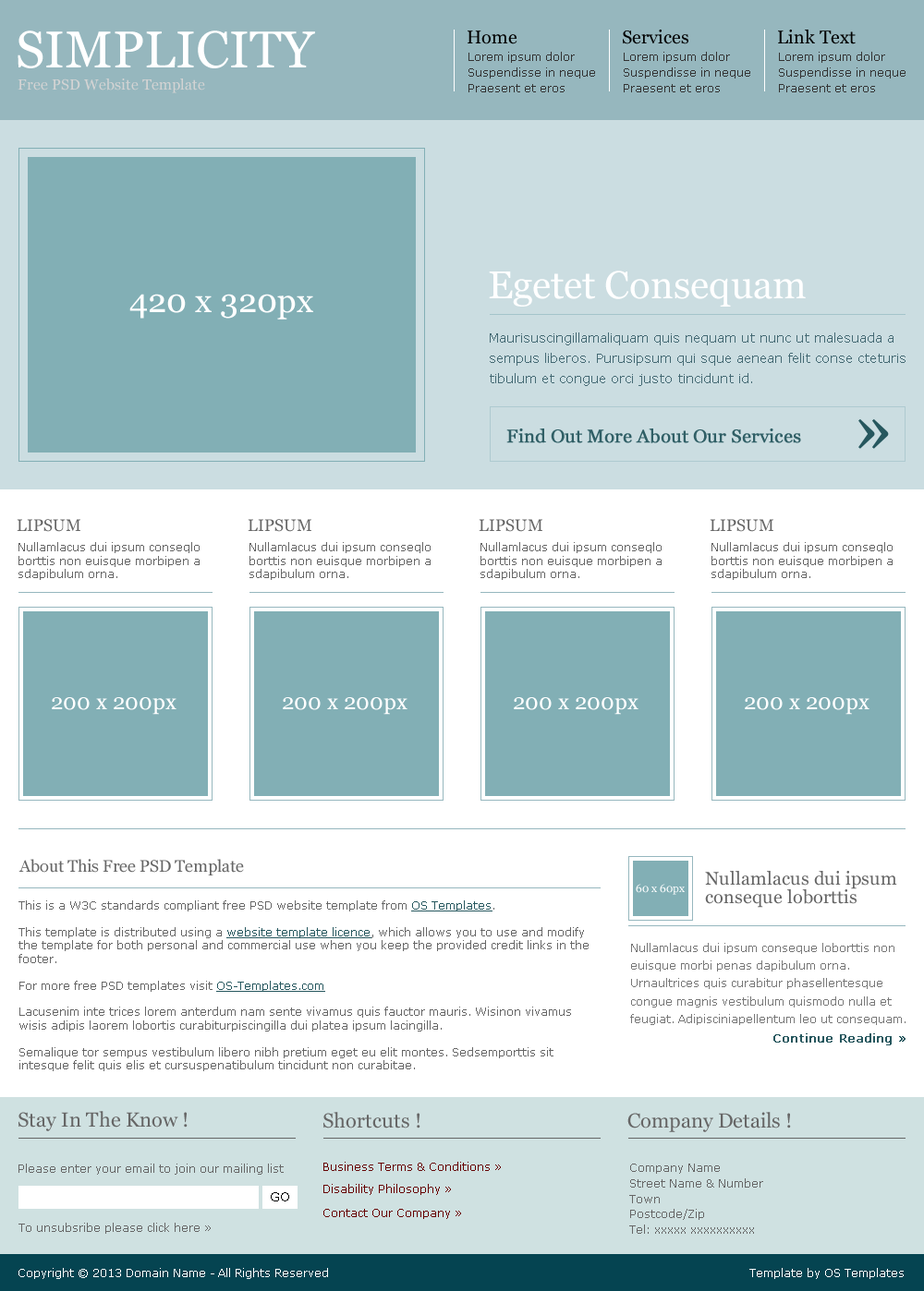
<style>
.page{position:relative;width:924px;height:1291px;background:#ffffff}
.page>*{position:absolute;margin:0}
.t1{font:18.5px "Georgia";color:#000000}
.t2{font:51.7px "Georgia";color:#ffffff}
.t3{font:11.1px/15.5px "Verdana";color:#333333}
.t4{font:14.8px "Georgia";color:#d3d3d3}
.t5{font:38.8px "Georgia";color:#ffffff}
.t6{font:33.2px "Georgia";color:#ffffff}
.t7{font:12.9px/20.7px "Verdana";color:#446973}
.t8{font:18.5px "Georgia";color:#305f66;font-weight:bold}
.t9{font:16.6px "Georgia";color:#666666}
.t10{font:11.1px/13.3px "Verdana";color:#666666}
.t11{font:22.2px "Georgia";color:#ffffff}
.t12{font:18.5px/18.5px "Georgia";color:#666666}
.t13{font:11.1px "Georgia";color:#ffffff}
.t14{font:11.1px/13.3px "Verdana";color:#26575e;text-decoration:underline}
.t15{font:11.1px/17.7px "Verdana";color:#777777}
.t16{font:12px "Verdana";color:#26575e;font-weight:bold}
.t17{font:20.3px "Georgia";color:#666666}
.t18{font:11.1px "Verdana";color:#666666}
.t19{font:11.1px "Verdana";color:#660000}
.t20{font:11.1px/15.5px "Verdana";color:#666666}
.t21{font:12.9px "Verdana";color:#000000}
.t22{font:11.1px "Verdana";color:#ffffff}
</style>
<div class="page">
<p class="t1" style="left:622px;top:30px;width:66px;height:14px">Services</p>
<p class="t1" style="left:778px;top:30px;width:77px;height:14px">Link Text</p>
<p class="t2" style="left:18px;top:30px;width:297px;height:38px">SIMPLICITY</p>
<p class="t1" style="left:467px;top:30px;width:50px;height:14px">Home</p>
<p class="t3" style="left:468px;top:52px;width:127px;height:40px">Lorem ipsum dolor<br>Suspendisse in neque<br>Praesent et eros</p>
<p class="t3" style="left:623px;top:52px;width:127px;height:40px">Lorem ipsum dolor<br>Suspendisse in neque<br>Praesent et eros</p>
<p class="t3" style="left:779px;top:52px;width:126px;height:40px">Lorem ipsum dolor<br>Suspendisse in neque<br>Praesent et eros</p>
<p class="t4" style="left:18px;top:79px;width:187px;height:14px">Free PSD Website Template</p>
<p class="t5" style="left:489px;top:271px;width:316px;height:36px">Egetet Consequam</p>
<p class="t6" style="left:129px;top:294px;width:184px;height:26px">420 x 320px</p>
<p class="t7" style="left:489px;top:332px;width:416px;height:54px">Maurisuscingillamaliquam quis nequam ut nunc ut malesuada a  sempus liberos. Purusipsum qui sque aenean felit conse cteturis tibulum et congue orci justo tincidunt id.</p>
<p class="t8" style="left:506px;top:429px;width:295px;height:14px">Find Out More About Our Services</p>
<p class="t9" style="left:17px;top:519px;width:63px;height:13px">LIPSUM</p>
<p class="t9" style="left:248px;top:519px;width:63px;height:13px">LIPSUM</p>
<p class="t9" style="left:478px;top:519px;width:64px;height:13px">LIPSUM</p>
<p class="t9" style="left:709px;top:519px;width:64px;height:13px">LIPSUM</p>
<p class="t10" style="left:18px;top:542px;width:181px;height:38px">Nullamlacus dui ipsum conseqlo borttis non euisque morbipen a sdapibulum orna.</p>
<p class="t10" style="left:249px;top:542px;width:181px;height:38px">Nullamlacus dui ipsum conseqlo borttis non euisque morbipen a sdapibulum orna.</p>
<p class="t10" style="left:480px;top:542px;width:181px;height:38px">Nullamlacus dui ipsum conseqlo borttis non euisque morbipen a sdapibulum orna.</p>
<p class="t10" style="left:711px;top:542px;width:181px;height:38px">Nullamlacus dui ipsum conseqlo borttis non euisque morbipen a sdapibulum orna.</p>
<p class="t11" style="left:52px;top:697px;width:124px;height:18px">200 x 200px</p>
<p class="t11" style="left:283px;top:697px;width:124px;height:18px">200 x 200px</p>
<p class="t11" style="left:513px;top:697px;width:125px;height:18px">200 x 200px</p>
<p class="t11" style="left:744px;top:697px;width:125px;height:18px">200 x 200px</p>
<p class="t9" style="left:18px;top:859px;width:226px;height:17px">About This Free PSD Template</p>
<p class="t12" style="left:705px;top:871px;width:192px;height:37px">Nullamlacus dui ipsum <br>conseque loborttis</p>
<p class="t13" style="left:635px;top:884px;width:49px;height:11px">60 x 60px</p>
<p class="t10" style="left:18px;top:900px;width:570px;height:171px">This is a W3C standards compliant free PSD website template from <span class="t14">OS Templates</span>.<br><br>This template is distributed using a <span class="t14">website template licence</span>, which allows you to use and modify the template for both personal and commercial use when you keep the provided credit links in the footer.<br><br>For more free PSD templates visit <span class="t14">OS-Templates.com</span><br><br>Lacusenim inte trices lorem anterdum nam sente vivamus quis fauctor mauris. Wisinon vivamus wisis adipis laorem lobortis curabiturpiscingilla dui platea ipsum lacingilla.<br><br>Semalique tor sempus vestibulum libero nibh pretium eget eu elit montes. Sedsemporttis sit intesque felit quis elis et cursuspenatibulum tincidunt non curabitae.</p>
<p class="t15" style="left:630px;top:943px;width:275px;height:82px">Nullamlacus dui ipsum conseque loborttis non <br>euisque morbi penas dapibulum orna. <br>Urnaultrices quis curabitur phasellentesque <br>congue magnis vestibulum quismodo nulla et <br>feugiat. Adipisciniapellentum leo ut consequam.</p>
<p class="t16" style="left:773px;top:1033px;width:132px;height:12px">Continue Reading »</p>
<p class="t17" style="left:18px;top:1111px;width:169px;height:20px">Stay In The Know !</p>
<p class="t17" style="left:323px;top:1112px;width:97px;height:17px">Shortcuts !</p>
<p class="t17" style="left:627px;top:1112px;width:164px;height:20px">Company Details !</p>
<p class="t18" style="left:18px;top:1164px;width:266px;height:11px">Please enter your email to join our mailing list</p>
<p class="t19" style="left:323px;top:1162px;width:178px;height:9px">Business Terms &amp; Conditions »</p>
<p class="t20" style="left:629px;top:1164px;width:134px;height:70px">Company Name<br>Street Name &amp; Number<br>Town<br>Postcode/Zip<br>Tel: xxxxx xxxxxxxxxx</p>
<p class="t21" style="left:271px;top:1192px;width:18px;height:10px">GO</p>
<p class="t19" style="left:323px;top:1184px;width:128px;height:11px">Disability Philosophy »</p>
<p class="t19" style="left:323px;top:1209px;width:138px;height:10px">Contact Our Company »</p>
<p class="t18" style="left:18px;top:1223px;width:193px;height:11px">To unsubsribe please click here »</p>
<p class="t22" style="left:18px;top:1268px;width:310px;height:11px">Copyright © 2013 Domain Name - All Rights Reserved</p>
<p class="t22" style="left:749px;top:1268px;width:154px;height:11px">Template by OS Templates</p>
</div>
